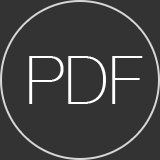
<style>
.page{position:relative;width:160px;height:160px;background:#333333}
.page>*{position:absolute;margin:0}
.t1{font:66.7px "HelveticaNeue-Thin";color:#ffffff}
</style>
<div class="page">
<p class="t1" style="left:29px;top:56px;width:114px;height:48px">PDF</p>
</div>
